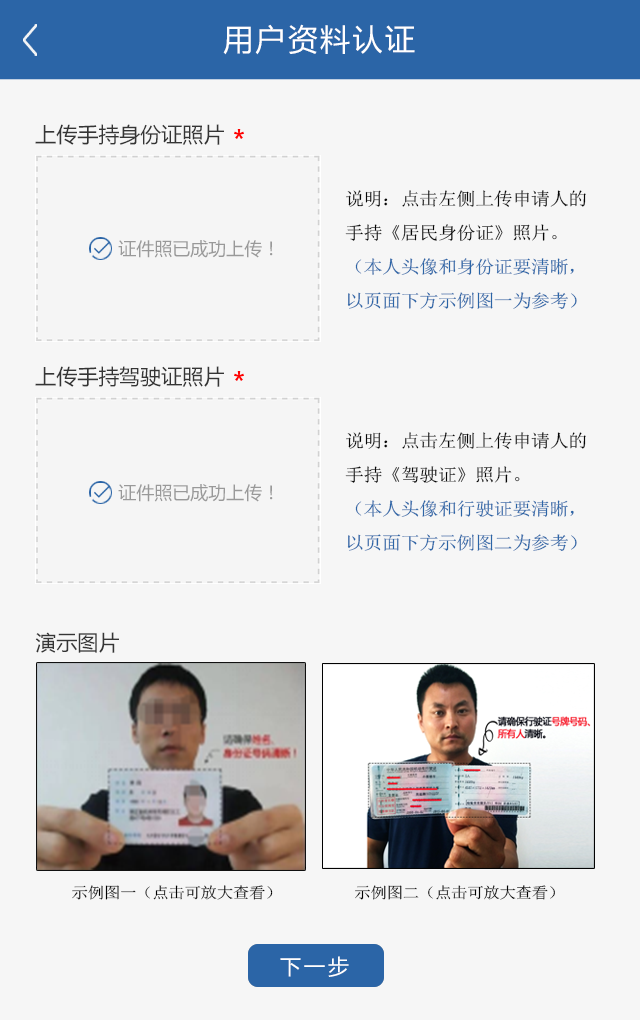
<style>
.page{position:relative;width:640px;height:1020px;background:#f6f6f6}
.page>*{position:absolute;margin:0}
.t1{font:30px "MicrosoftYaHei";letter-spacing:0.08em;color:#ffffff}
.t2{font:21px "MicrosoftYaHei";color:#353535}
.t3{font:18px/34px "SimSun";letter-spacing:-0.02em;color:#2b65a7;scale:1.06 1}
.t4{font:18px/34px "SimSun";letter-spacing:-0.02em;color:#060606;scale:1.06 1}
.t5{font:18px "MicrosoftYaHei";color:#999999}
.t6{font:15.6px "SimSun";letter-spacing:-0.02em;color:#000000;scale:1.06 1}
.t7{font:21px "MicrosoftYaHei";letter-spacing:0.14em;color:#ffffff}
</style>
<div class="page">
<p class="t1" style="left:223px;top:24px;width:192px;height:31px">用户资料认证</p>
<p class="t2" style="left:35px;top:124px;width:189px;height:21px">上传手持身份证照片</p>
<p class="t3" style="left:345px;top:190px;width:241px;height:119px"><span class="t4">说明：点击左侧上传申请人的手持《居民身份证》照片。<br></span>（本人头像和身份证要清晰，以页面下方示例图一为参考）</p>
<p class="t5" style="left:118px;top:240px;width:155px;height:18px">证件照已成功上传！</p>
<p class="t2" style="left:35px;top:366px;width:189px;height:21px">上传手持驾驶证照片</p>
<p class="t3" style="left:345px;top:432px;width:241px;height:119px"><span class="t4">说明：点击左侧上传申请人的手持《驾驶证》照片。<br></span>（本人头像和行驶证要清晰，以页面下方示例图二为参考）</p>
<p class="t5" style="left:118px;top:484px;width:155px;height:18px">证件照已成功上传！</p>
<p class="t2" style="left:35px;top:632px;width:84px;height:21px">演示图片</p>
<p class="t6" style="left:72px;top:885px;width:201px;height:15px">示例图一（点击可放大查看）</p>
<p class="t6" style="left:355px;top:885px;width:200px;height:15px">示例图二（点击可放大查看）</p>
<p class="t7" style="left:280px;top:956px;width:69px;height:21px">下一步</p>
</div>
